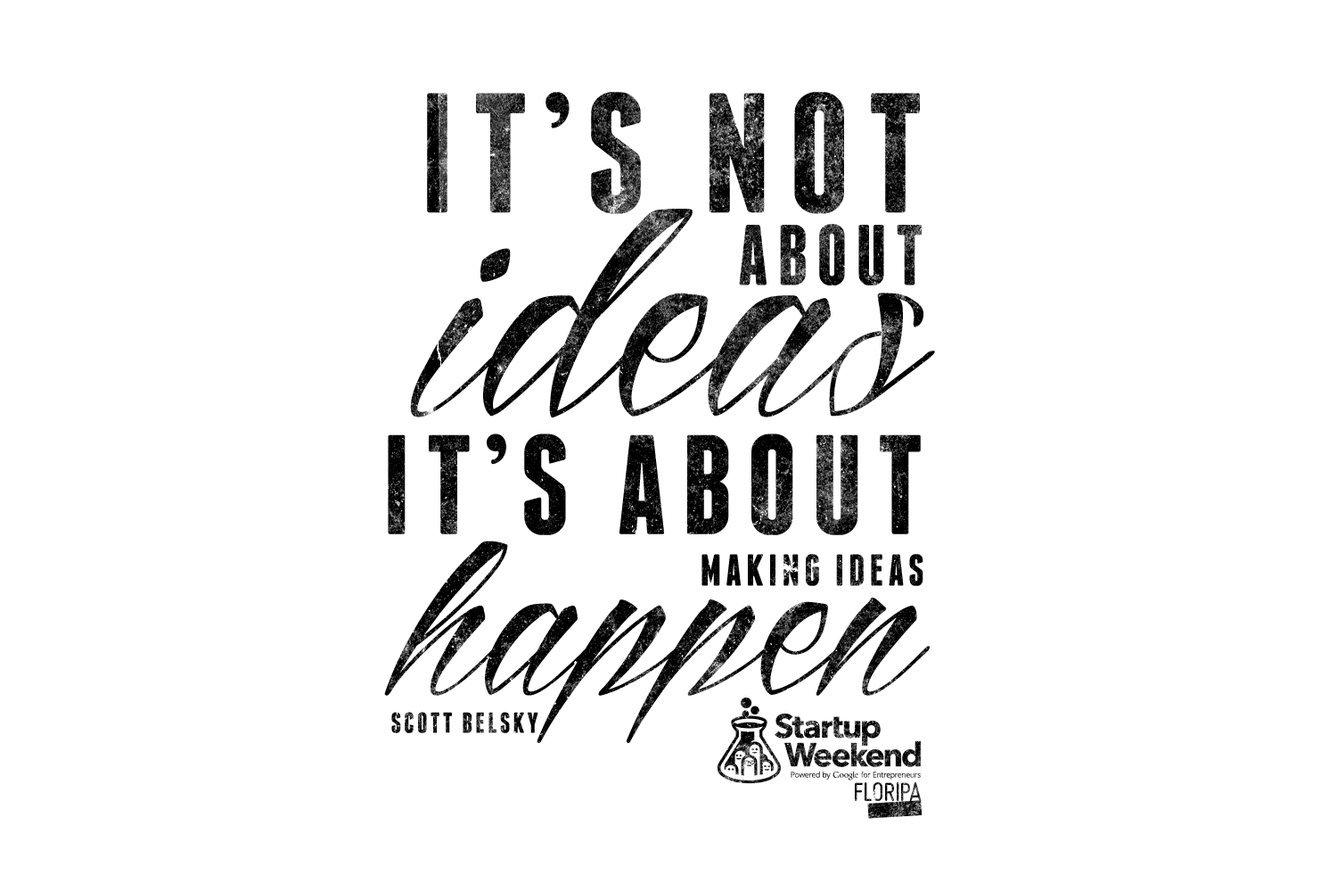
<style>
.page{position:relative;width:1337px;height:892px;background:#ffffff}
.page>*{position:absolute;margin:0}
.t1{font:44.3px/51.5px "Franchise-Bold";letter-spacing:0.1em;text-transform:uppercase}
.t2{font:170px/0px "Franchise-Bold";letter-spacing:0.1em;text-transform:uppercase}
.t3{font:85.6px/72.4px "Franchise-Bold";letter-spacing:0.1em;text-transform:uppercase}
.t4{font:283.7px/129.3px "ReditumPersonalUseOnly"}
.t5{font:141.2px/119.7px "Franchise-Bold";letter-spacing:0.1em;text-transform:uppercase}
.t6{font:214.3px/107.7px "ReditumPersonalUseOnly"}
.t7{font:28.7px/39.5px "Franchise-Bold";letter-spacing:0.1em;text-transform:uppercase}
</style>
<div class="page">
<p class="t1" style="left:384px;top:92px;width:551px;height:651px;text-align:right"><span class="t2">It’s not<br>             </span><span class="t3"> about<br></span><span class="t4">ideas<br></span><span class="t5">It’s about<br></span>  making ideas<br><span class="t6">happen<br></span><span class="t7">   scott belsky</span></p>
</div>
